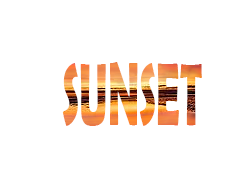
<style>
.page{position:relative;width:250px;height:180px;background:#ffffff}
.page>*{position:absolute;margin:0}
.t1{font:89.2px "BerlinSansFBDemi-Bold";scale:0.47 1}
</style>
<div class="page">
<p class="t1" style="left:62px;top:62px;width:140px;height:64px">SUNSET</p>
</div>
